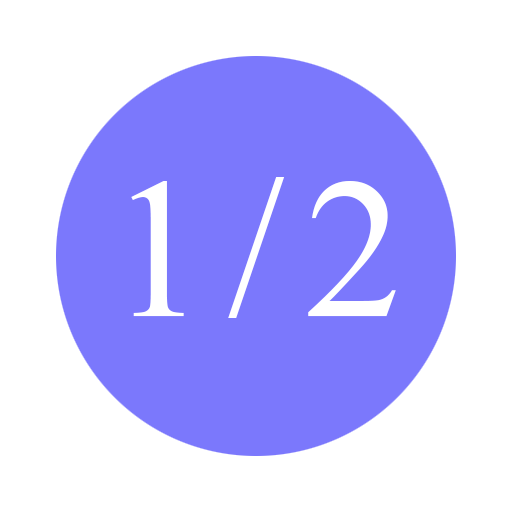
<style>
.page{position:relative;width:512px;height:512px;background:#ffffff}
.page>*{position:absolute;margin:0}
.t1{font:200px "TimesNewRomanPSMT";letter-spacing:0.1em;color:#ffffff}
</style>
<div class="page">
<p class="t1" style="left:131px;top:177px;width:265px;height:141px">1/2</p>
</div>
